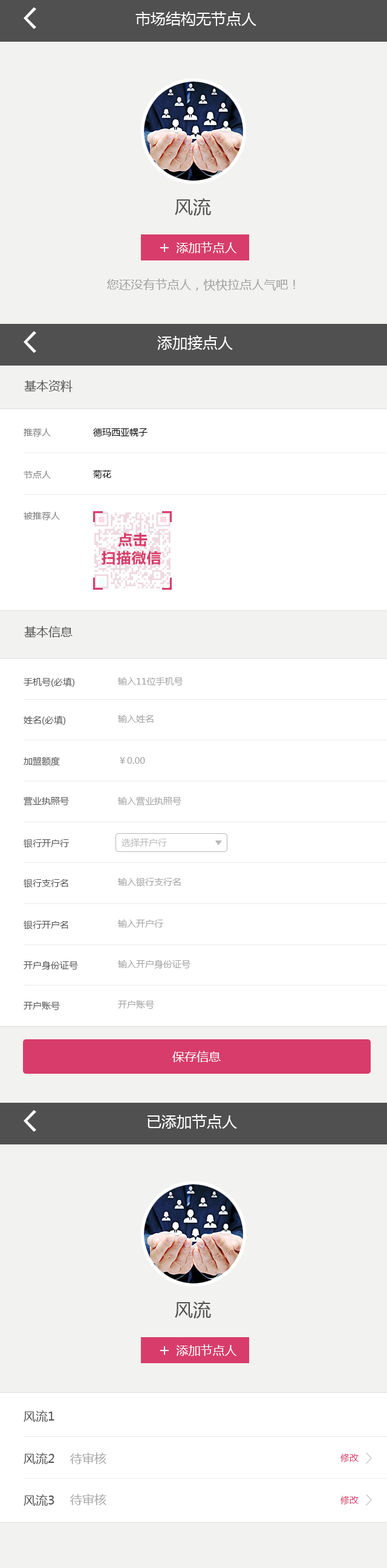
<style>
.page{position:relative;width:387px;height:1568px;background:#ffffff}
.page>*{position:absolute;margin:0}
.t1{font:15.1px "MicrosoftYaHei";color:#ffffff}
.t2{font:18.1px "MicrosoftYaHei";color:#505050}
.t3{font:12.1px "MicrosoftYaHei";color:#ffffff}
.t4{font:12.1px "MicrosoftYaHei";color:#9f9f9e}
.t5{font:12.1px "MicrosoftYaHei";color:#505050}
.t6{font:9.1px "MicrosoftYaHei";color:#7e7e7e}
.t7{font:9.1px "MicrosoftYaHei";color:#000000}
.t8{font:15.1px/18.1px "FZLTCHJW--GB1-0";color:#d83c6b}
.t9{font:9.1px "MicrosoftYaHei";color:#505050}
.t10{font:9.1px "MicrosoftYaHei";color:#a3a3a3}
.t11{font:9.1px "MicrosoftYaHei";color:#b8b8b8}
.t12{font:12.1px "MicrosoftYaHei";color:#a4a4a4}
.t13{font:9.1px "MicrosoftYaHei";color:#d83c6b}
</style>
<div class="page">
<p class="t1" style="left:135px;top:11px;width:121px;height:15px">市场结构无节点人</p>
<p class="t2" style="left:175px;top:198px;width:36px;height:18px">风流</p>
<p class="t3" style="left:176px;top:242px;width:61px;height:11px">添加节点人</p>
<p class="t4" style="left:106px;top:279px;width:189px;height:12px">您还没有节点人，快快拉点人气吧！</p>
<p class="t1" style="left:157px;top:335px;width:76px;height:15px">添加接点人</p>
<p class="t5" style="left:24px;top:380px;width:49px;height:12px">基本资料</p>
<p class="t6" style="left:24px;top:428px;width:27px;height:9px">推荐人</p>
<p class="t7" style="left:93px;top:428px;width:54px;height:9px">德玛西亚幌子</p>
<p class="t6" style="left:24px;top:471px;width:27px;height:8px">节点人</p>
<p class="t7" style="left:93px;top:469px;width:18px;height:10px">菊花</p>
<p class="t6" style="left:24px;top:511px;width:36px;height:9px">被推荐人</p>
<p class="t8" style="left:102px;top:532px;width:59px;height:33px">点击<br>扫描微信</p>
<p class="t5" style="left:24px;top:626px;width:49px;height:11px">基本信息</p>
<p class="t9" style="left:24px;top:677px;width:50px;height:10px">手机号(必填)</p>
<p class="t10" style="left:118px;top:677px;width:65px;height:9px">输入11位手机号</p>
<p class="t9" style="left:24px;top:715px;width:41px;height:10px">姓名(必填)</p>
<p class="t10" style="left:118px;top:715px;width:35px;height:8px">输入姓名</p>
<p class="t9" style="left:24px;top:757px;width:36px;height:9px">加盟额度</p>
<p class="t10" style="left:120px;top:757px;width:25px;height:7px">￥0.00</p>
<p class="t9" style="left:24px;top:796px;width:45px;height:10px">营业执照号</p>
<p class="t10" style="left:118px;top:796px;width:63px;height:10px">输入营业执照号</p>
<p class="t9" style="left:24px;top:839px;width:45px;height:9px">银行开户行</p>
<p class="t11" style="left:121px;top:838px;width:46px;height:9px">选择开户行</p>
<p class="t9" style="left:24px;top:879px;width:44px;height:9px">银行支行名</p>
<p class="t10" style="left:118px;top:877px;width:63px;height:9px">输入银行支行名</p>
<p class="t9" style="left:24px;top:920px;width:44px;height:9px">银行开户名</p>
<p class="t10" style="left:118px;top:920px;width:45px;height:8px">输入开户行</p>
<p class="t9" style="left:24px;top:961px;width:54px;height:9px">开户身份证号</p>
<p class="t10" style="left:118px;top:960px;width:72px;height:9px">输入开户身份证号</p>
<p class="t9" style="left:24px;top:1002px;width:36px;height:8px">开户账号</p>
<p class="t10" style="left:118px;top:1001px;width:36px;height:8px">开户账号</p>
<p class="t3" style="left:172px;top:1051px;width:49px;height:11px">保存信息</p>
<p class="t1" style="left:147px;top:1114px;width:90px;height:15px">已添加节点人</p>
<p class="t2" style="left:175px;top:1301px;width:36px;height:17px">风流</p>
<p class="t3" style="left:176px;top:1344px;width:61px;height:12px">添加节点人</p>
<p class="t5" style="left:24px;top:1410px;width:30px;height:12px">风流1</p>
<p class="t5" style="left:24px;top:1453px;width:30px;height:11px">风流2</p>
<p class="t12" style="left:70px;top:1453px;width:36px;height:11px">待审核</p>
<p class="t13" style="left:340px;top:1453px;width:18px;height:9px">修改</p>
<p class="t12" style="left:70px;top:1494px;width:36px;height:11px">待审核</p>
<p class="t5" style="left:24px;top:1494px;width:30px;height:12px">风流3</p>
<p class="t13" style="left:340px;top:1495px;width:18px;height:10px">修改</p>
</div>
